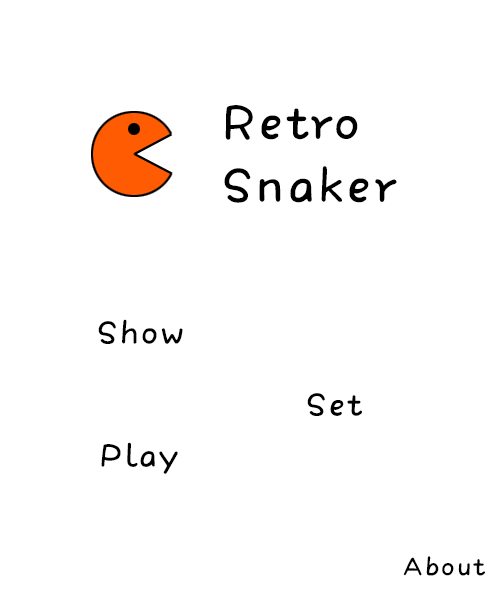
<style>
.page{position:relative;width:500px;height:600px;background:#ffffff}
.page>*{position:absolute;margin:0}
.t1{font:62.5px/62.5px "HYLiLiTiW";letter-spacing:0.06em;color:#000000}
.t2{font:41.7px "HYLiLiTiW";letter-spacing:0.06em;color:#000000}
.t3{font:33.3px "HYLiLiTiW";letter-spacing:0.06em;color:#000000}
</style>
<div class="page">
<p class="t1" style="left:224px;top:105px;width:173px;height:98px">Retro <br>Snaker</p>
<p class="t2" style="left:98px;top:319px;width:85px;height:25px">Show</p>
<p class="t2" style="left:307px;top:393px;width:55px;height:23px">Set</p>
<p class="t2" style="left:101px;top:442px;width:77px;height:32px">Play</p>
<p class="t3" style="left:403px;top:556px;width:82px;height:20px">About</p>
</div>
